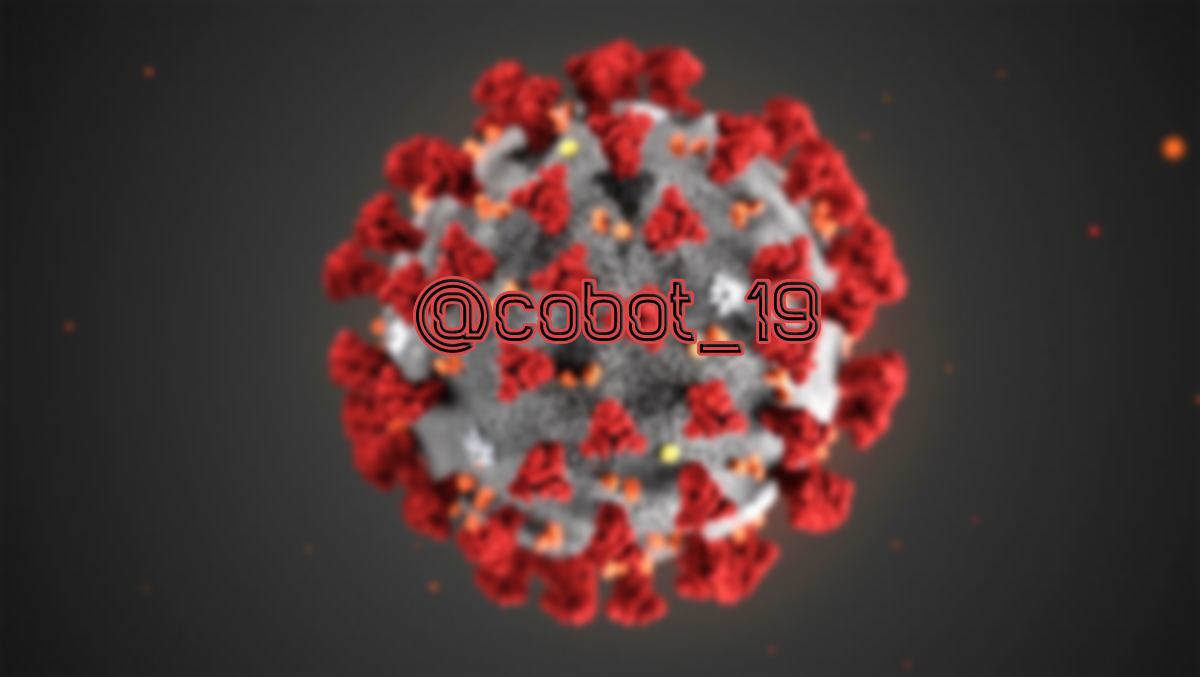
<style>
.page{position:relative;width:1200px;height:677px}
.page>*{position:absolute;margin:0}
.t1{font:71px "Sportrop-Regular";color:#000000}
</style>
<div class="page">
<p class="t1" style="left:415px;top:278px;width:404px;height:75px">@cobot_19</p>
</div>
